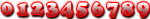
<style>
.page{position:relative;width:150px;height:19px}
.page>*{position:absolute;margin:0}
.t1{font:19.4px "CooperBlackStd";letter-spacing:0.125em;scale:0.97 1}
</style>
<div class="page">
<p class="t1" style="left:1px;top:3px;width:12px;height:11px">0</p>
<p class="t1" style="left:31px;top:2px;width:12px;height:13px">2</p>
<p class="t1" style="left:46px;top:2px;width:12px;height:14px">3</p>
<p class="t1" style="left:76px;top:2px;width:12px;height:14px">5</p>
<p class="t1" style="left:92px;top:2px;width:11px;height:13px">6</p>
<p class="t1" style="left:107px;top:2px;width:11px;height:15px">7</p>
<p class="t1" style="left:121px;top:2px;width:12px;height:13px">8</p>
<p class="t1" style="left:137px;top:2px;width:12px;height:15px">9</p>
</div>
